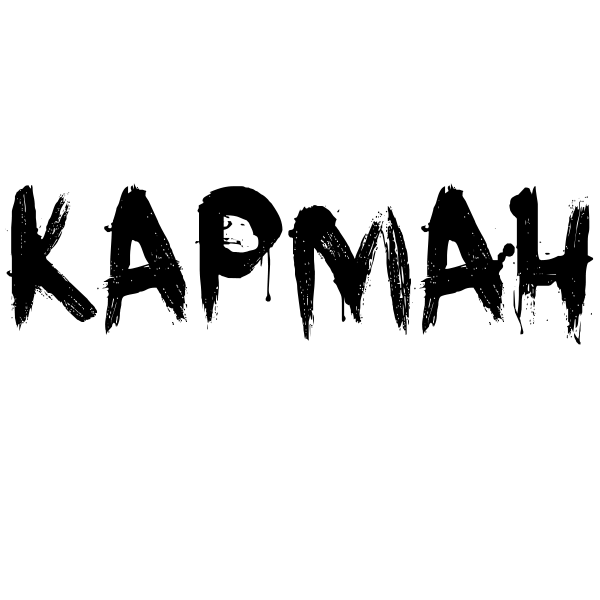
<style>
.page{position:relative;width:600px;height:600px;background:#ffffff}
.page>*{position:absolute;margin:0}
.t1{font:220.1px "DKFaceYourFearsRUSBYLYAJK";color:#000000}
</style>
<div class="page">
<p class="t1" style="left:5px;top:183px;width:589px;height:162px">Карман</p>
</div>
